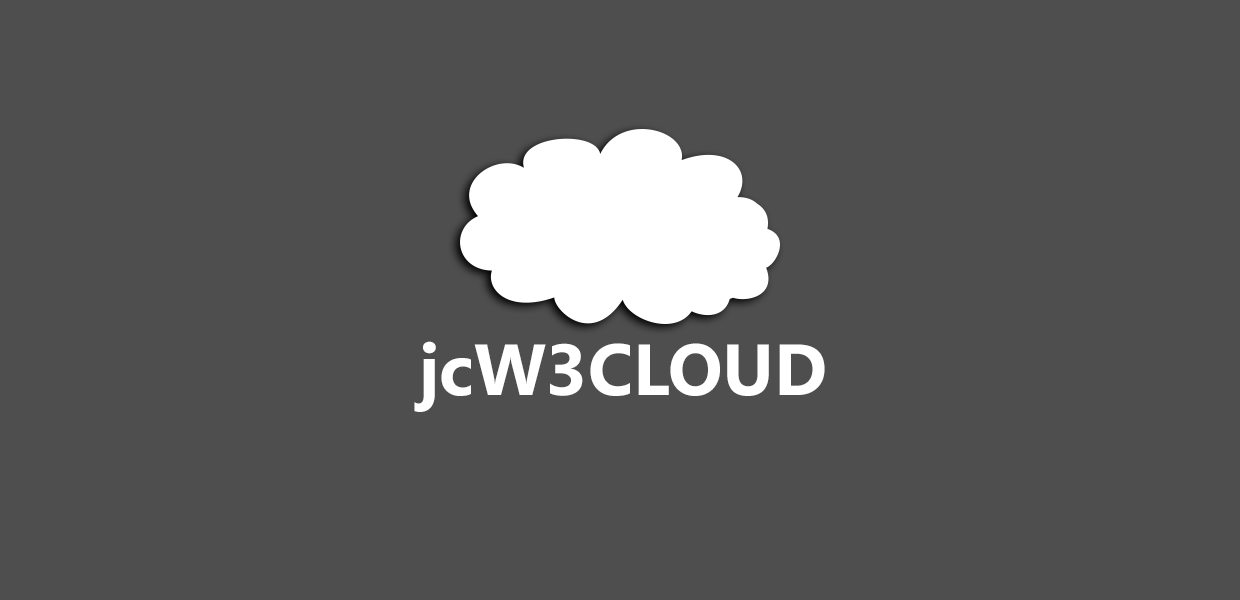
<style>
.page{position:relative;width:1240px;height:600px;background:#4e4e4e}
.page>*{position:absolute;margin:0}
.t1{font:72px "SegoeUI-Bold";color:#ffffff}
</style>
<div class="page">
<p class="t1" style="left:414px;top:341px;width:411px;height:71px">jcW3CLOUD</p>
</div>
